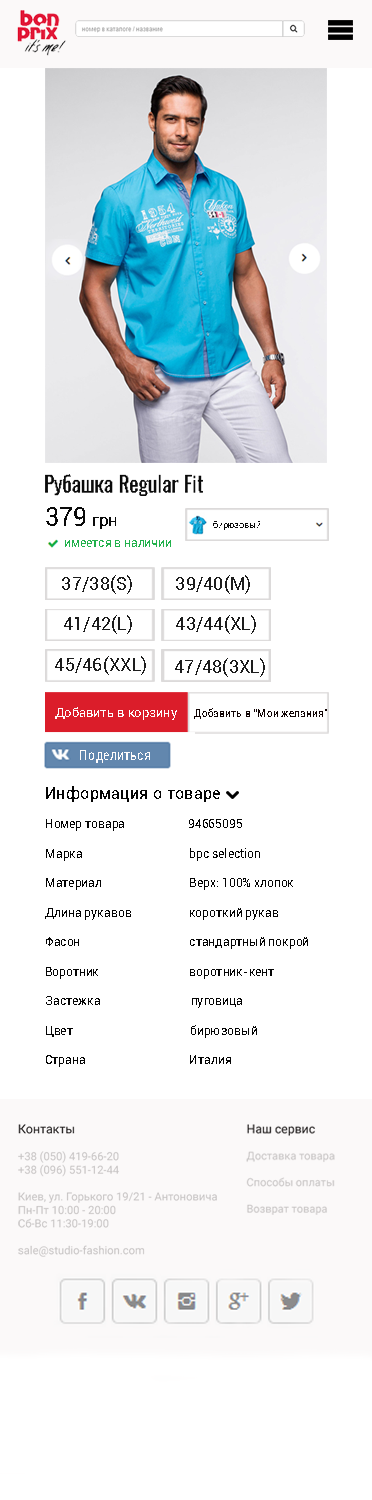
<style>
.page{position:relative;width:372px;height:1500px;background:#ffffff}
.page>*{position:absolute;margin:0}
.t1{font:22.1px "Oswald-Regular";color:#0a0a0a}
.t2{font:25.5px "Roboto-Regular";color:#0a0a0a}
.t3{font:17px "Roboto-Regular";color:#0a0a0a}
.t4{font:8.9px "Roboto-Regular";color:#0a0a0a}
.t5{font:12.4px "Roboto-Regular";color:#22b14c}
.t6{font:18.2px "Roboto-Regular";color:#1d1d1d}
.t7{font:12.8px "Roboto-Regular";color:#fdfcfc}
.t8{font:10.4px "Roboto-Regular";color:#100303}
.t9{font:12.6px "Roboto-Regular";color:#fffcfc}
.t10{font:16.4px "Roboto-Regular";color:#050505}
.t11{font:11.2px "Roboto-Regular";color:#c7c4c4}
.t12{font:12.4px "Roboto-Regular";color:#1e1b1b}
.t13{font:11px "Roboto-Regular";color:#c7c4c4}
.t14{font:12.2px "Roboto-Regular";color:#1e1b1b}
</style>
<div class="page">
<p class="t1" style="left:45px;top:474px;width:158px;height:22px">Рубашка Regular Fit</p>
<p class="t2" style="left:46px;top:507px;width:70px;height:22px">379<span class="t3"> грн</span></p>
<p class="t4" style="left:213px;top:521px;width:47px;height:9px">бирюзовый</p>
<p class="t5" style="left:65px;top:540px;width:106px;height:7px">имеется в наличии</p>
<p class="t6" style="left:62px;top:575px;width:70px;height:19px">37/38(S)</p>
<p class="t6" style="left:176px;top:575px;width:74px;height:19px">39/40(M)</p>
<p class="t6" style="left:64px;top:615px;width:68px;height:19px">41/42(L)</p>
<p class="t6" style="left:176px;top:615px;width:80px;height:19px">43/44(XL)</p>
<p class="t6" style="left:55px;top:656px;width:91px;height:19px">45/46(XXL)</p>
<p class="t6" style="left:175px;top:658px;width:90px;height:19px">47/48(3XL)</p>
<p class="t7" style="left:55px;top:707px;width:122px;height:13px">Добавить в корзину</p>
<p class="t8" style="left:194px;top:708px;width:133px;height:11px">Добавить в “Мои желания”</p>
<p class="t9" style="left:80px;top:750px;width:70px;height:13px">Поделиться</p>
<p class="t10" style="left:46px;top:786px;width:174px;height:16px">Информация о товаре</p>
<p class="t11" style="left:18px;top:1124px;width:199px;height:133px;text-align:right"><span class="t12">Контакты<br></span><br>+38 (050) 419-66-20<br>+38 (096) 551-12-44<br><br>Киев, ул. Горького 19/21 - Антоновича<br>Пн-Пт 10:00 - 20:00<br>Cб-Вс 11:30-19:00<br><br>sale@studio-fashion.com</p>
<p class="t13" style="left:246px;top:1124px;width:89px;height:91px;text-align:right"><span class="t14">Наш сервис<br></span><br>Доставка товара <br><br>Способы оплаты<br><br>Возврат товара</p>
</div>
